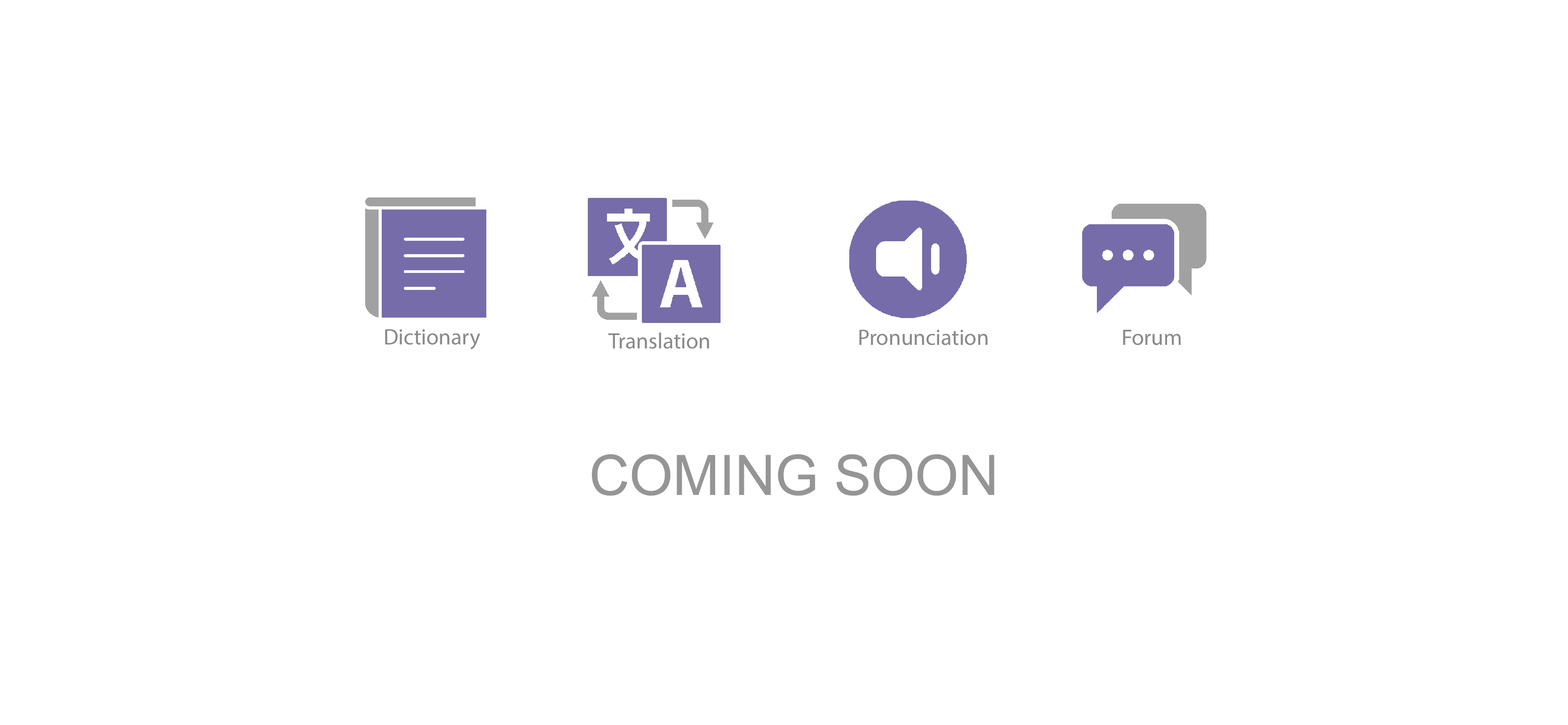
<style>
.page{position:relative;width:1568px;height:725px;background:#ffffff}
.page>*{position:absolute;margin:0}
.t1{font:22.3px "MyriadPro-Regular";color:#898989}
.t2{font:55.9px "ArialMT";color:#959595}
</style>
<div class="page">
<p class="t1" style="left:385px;top:329px;width:96px;height:21px">Dictionary</p>
<p class="t1" style="left:859px;top:330px;width:129px;height:16px">Pronunciation</p>
<p class="t1" style="left:1123px;top:330px;width:58px;height:16px">Forum</p>
<p class="t1" style="left:608px;top:333px;width:101px;height:16px">Translation</p>
<p class="t2" style="left:592px;top:455px;width:403px;height:41px">COMING SOON</p>
</div>
